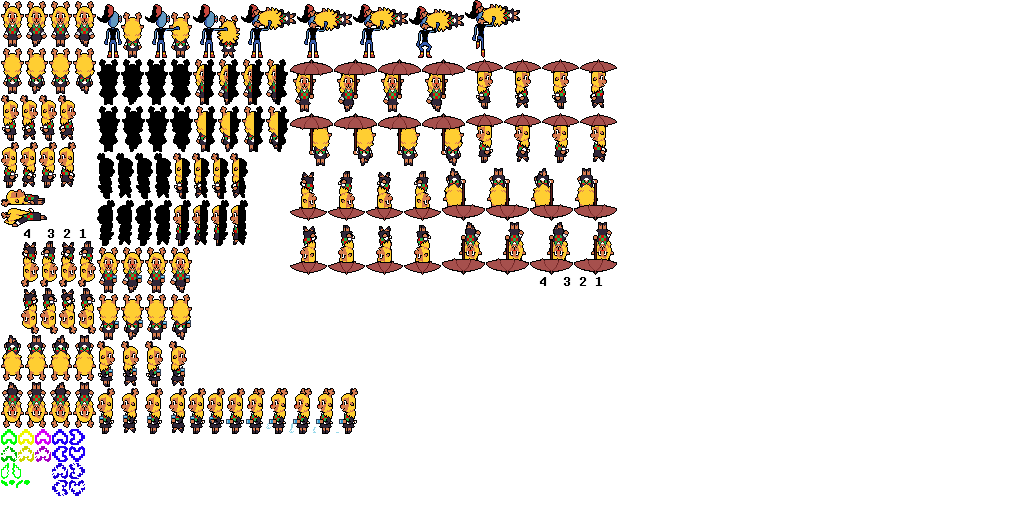
<style>
.page{position:relative;width:1024px;height:512px;background:#ffffff}
.page>*{position:absolute;margin:0}
.t1{font:16px "DeterminationMonoWeb";color:#000000}
</style>
<div class="page">
<p class="t1" style="left:23px;top:229px;width:64px;height:9px">4  3 2 1</p>
<p class="t1" style="left:539px;top:277px;width:64px;height:9px">4  3 2 1</p>
</div>
